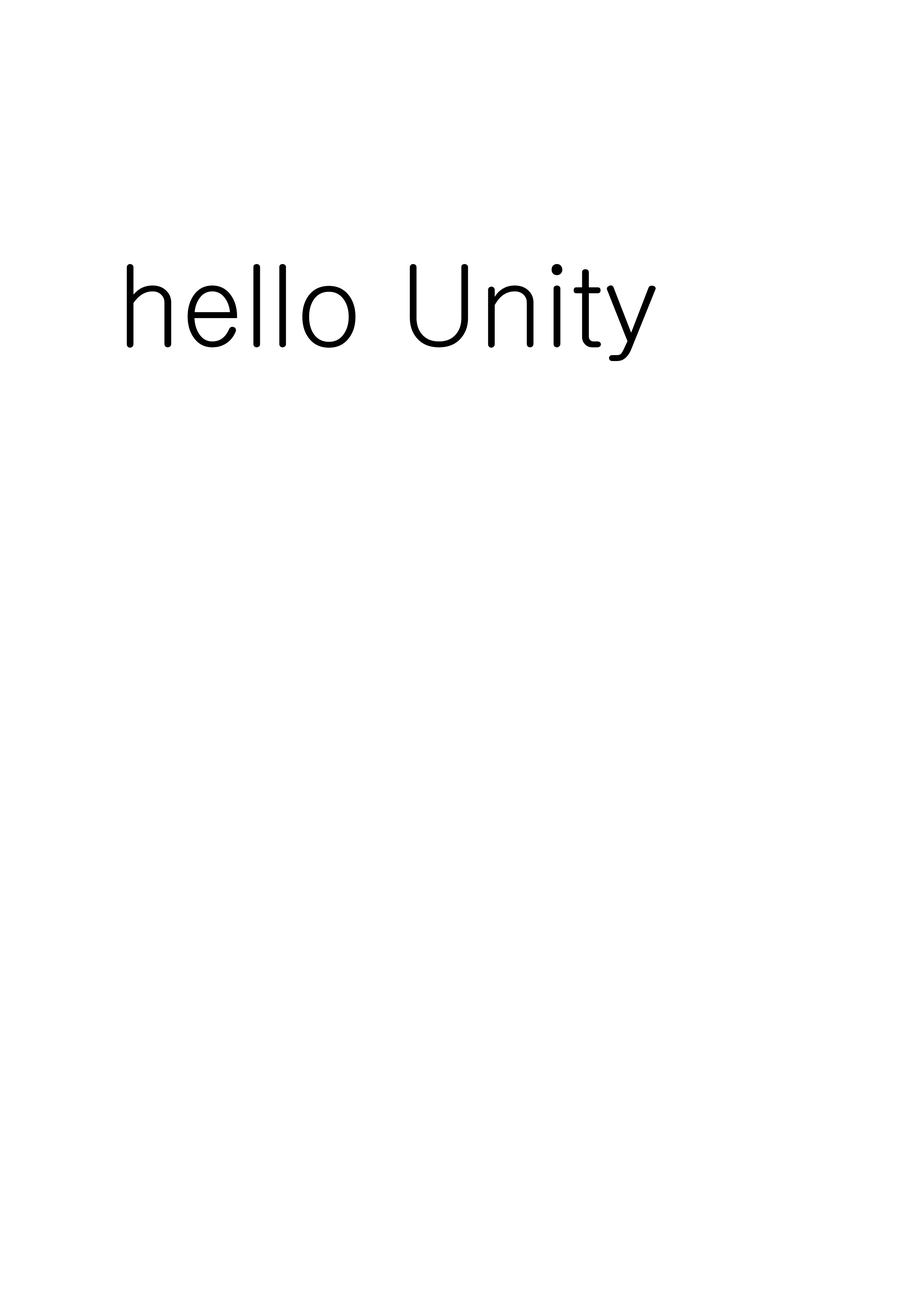
<style>
.page{position:relative;width:918px;height:1299px;background:#ffffff}
.page>*{position:absolute;margin:0}
.t1{font:111.1px "Gulim";color:#000000}
</style>
<div class="page">
<p class="t1" style="left:127px;top:264px;width:529px;height:97px">hello Unity</p>
</div>
